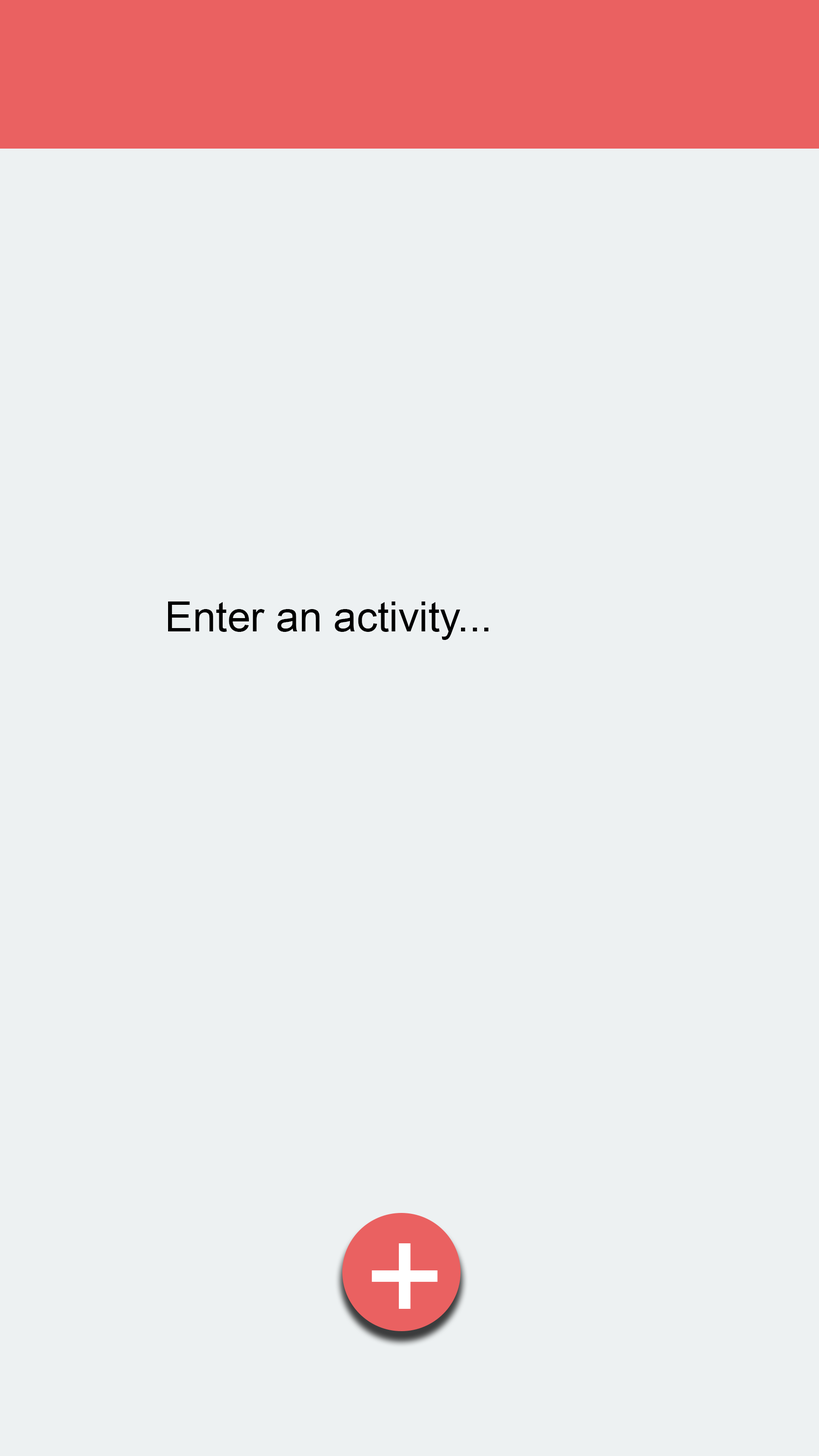
<style>
.page{position:relative;width:819px;height:1456px;background:#edf1f2}
.page>*{position:absolute;margin:0}
.t1{font:41.5px "ArialMT";color:#000000}
.t2{font:138.5px "ArialMT";color:#ffffff}
</style>
<div class="page">
<p class="t1" style="left:168px;top:602px;width:321px;height:38px">Enter an activity...</p>
<p class="t2" style="left:372px;top:1243px;width:66px;height:66px">+</p>
</div>
